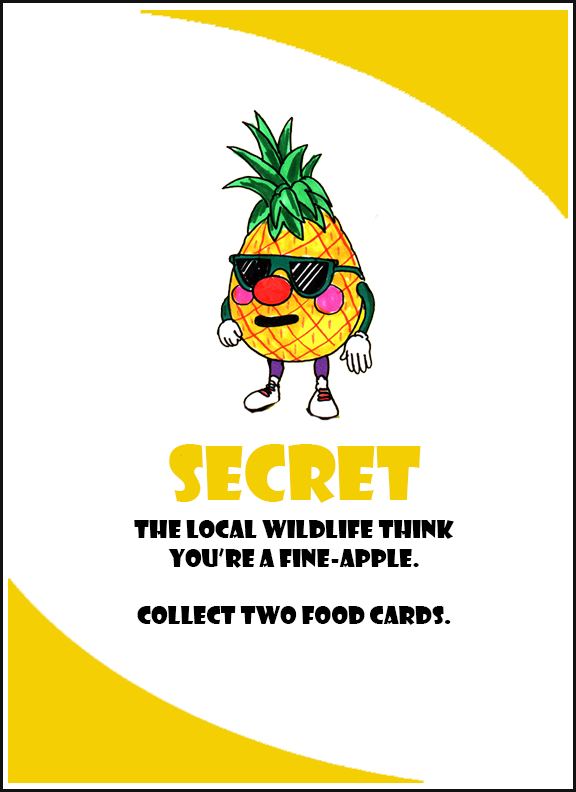
<style>
.page{position:relative;width:576px;height:792px;background:#ffffff}
.page>*{position:absolute;margin:0}
.t1{font:72px "ShowcardGothic-Reg";color:#f3ce03}
.t2{font:24px "ShowcardGothic-Reg";color:#000000}
</style>
<div class="page">
<p class="t1" style="left:169px;top:444px;width:252px;height:59px">SECRET</p>
<p class="t2" style="left:134px;top:520px;width:320px;height:105px;text-align:center">The local wildlife think you’re a fine-apple. <br><br>collect two food cards.</p>
</div>
